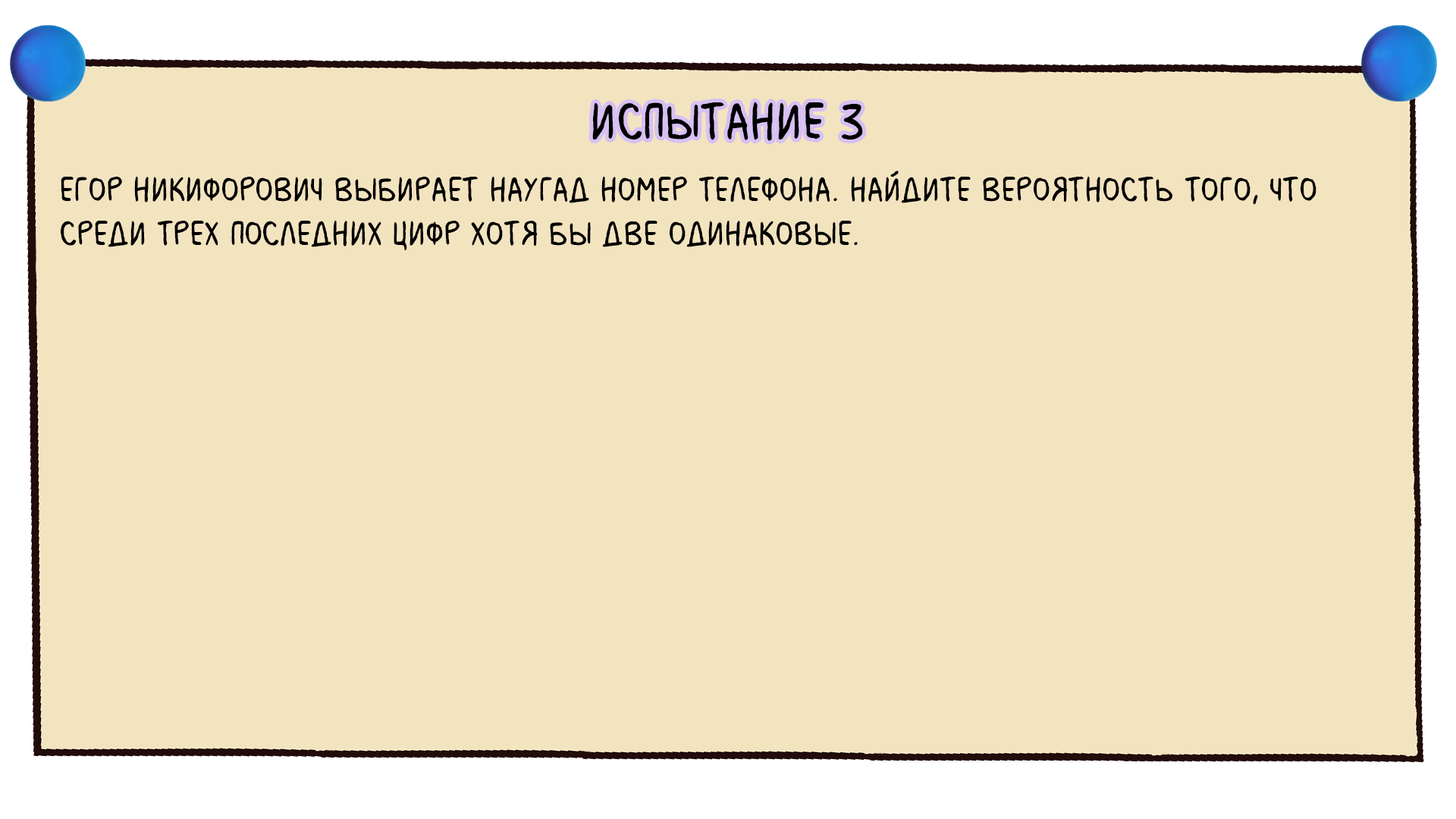
<style>
.page{position:relative;width:1456px;height:819px;background:#f3e4c0}
.page>*{position:absolute;margin:0}
.t1{font:54.6px "MilkMustacheBB";color:#000000}
.t2{font:36.4px "MilkMustacheBB";color:#000000}
</style>
<div class="page">
<p class="t1" style="left:592px;top:102px;width:271px;height:39px">испытание 3</p>
<p class="t2" style="left:61px;top:171px;width:1255px;height:79px">Егор Никифорович выбирает наугад номер телефона. Найдите вероятность того, что<br>среди трех последних цифр хотя бы две одинаковые.</p>
</div>
